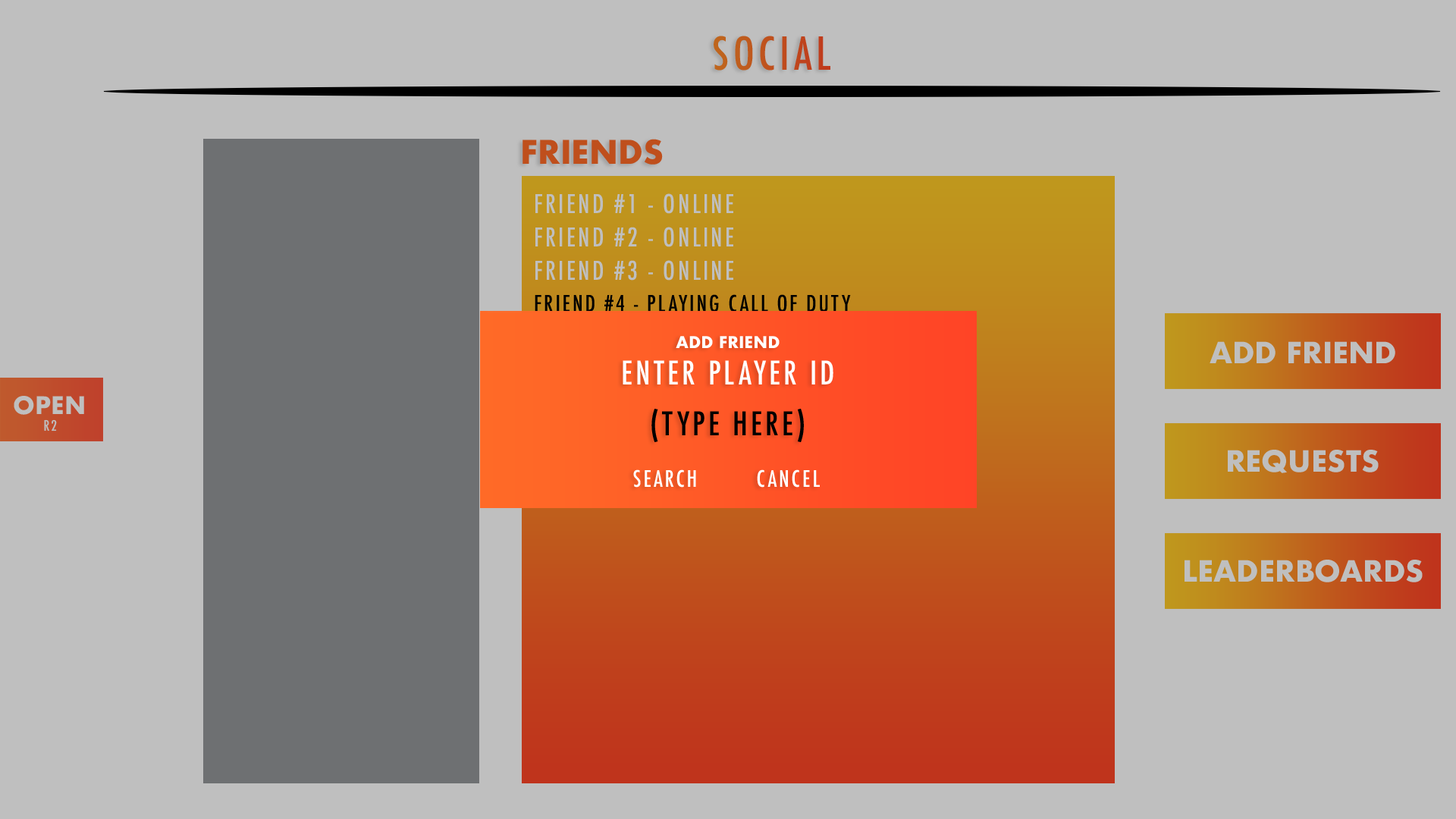
<style>
.page{position:relative;width:1456px;height:819px;background:#bfbfbf}
.page>*{position:absolute;margin:0}
.t1{font:44.2px "Futura-CondensedMedium";letter-spacing:0.1em;color:#bf521d}
.t2{font:31.6px "Futura-Bold";color:#bf4f1c}
.t3{font:25.3px "Futura-CondensedMedium";letter-spacing:0.1em;color:#bfbfbf}
.t4{font:22.1px "Futura-CondensedMedium";letter-spacing:0.1em;color:#000000}
.t5{font:15.8px "Futura-Bold";color:#ffffff}
.t6{font:28.4px "Futura-Bold";color:#bfbfbf}
.t7{font:31.6px "Futura-CondensedMedium";letter-spacing:0.1em;color:#ffffff}
.t8{font:23.6px "Futura-Bold";color:#bfbfbf}
.t9{font:31.6px "Futura-CondensedMedium";letter-spacing:0.1em;color:#000000}
.t10{font:14.1px "Futura-CondensedMedium";letter-spacing:0.1em;color:#bfbfbf}
.t11{font:22.1px "Futura-CondensedMedium";letter-spacing:0.1em;color:#ffffff}
</style>
<div class="page">
<p class="t1" style="left:714px;top:36px;width:116px;height:35px">SOCIAL</p>
<p class="t2" style="left:522px;top:139px;width:141px;height:26px">FRIENDS</p>
<p class="t3" style="left:535px;top:193px;width:198px;height:21px">FRIEND #1 - ONLINE</p>
<p class="t3" style="left:535px;top:227px;width:198px;height:20px">FRIEND #2 - ONLINE</p>
<p class="t3" style="left:535px;top:260px;width:198px;height:21px">FRIEND #3 - ONLINE</p>
<p class="t4" style="left:535px;top:294px;width:316px;height:18px">FRIEND #4 - PLAYING CALL OF DUTY</p>
<p class="t5" style="left:676px;top:336px;width:104px;height:12px">ADD FRIEND</p>
<p class="t6" style="left:1210px;top:341px;width:185px;height:22px">ADD FRIEND</p>
<p class="t7" style="left:623px;top:360px;width:210px;height:24px">ENTER PLAYER ID</p>
<p class="t8" style="left:14px;top:396px;width:70px;height:19px">OPEN</p>
<p class="t9" style="left:651px;top:409px;width:153px;height:33px">(TYPE HERE)</p>
<p class="t10" style="left:44px;top:419px;width:13px;height:12px">R2</p>
<p class="t6" style="left:1228px;top:450px;width:151px;height:23px">REQUESTS</p>
<p class="t11" style="left:633px;top:469px;width:63px;height:19px">SEARCH</p>
<p class="t11" style="left:757px;top:469px;width:63px;height:19px">CANCEL</p>
<p class="t6" style="left:1185px;top:560px;width:238px;height:22px">LEADERBOARDS</p>
</div>
